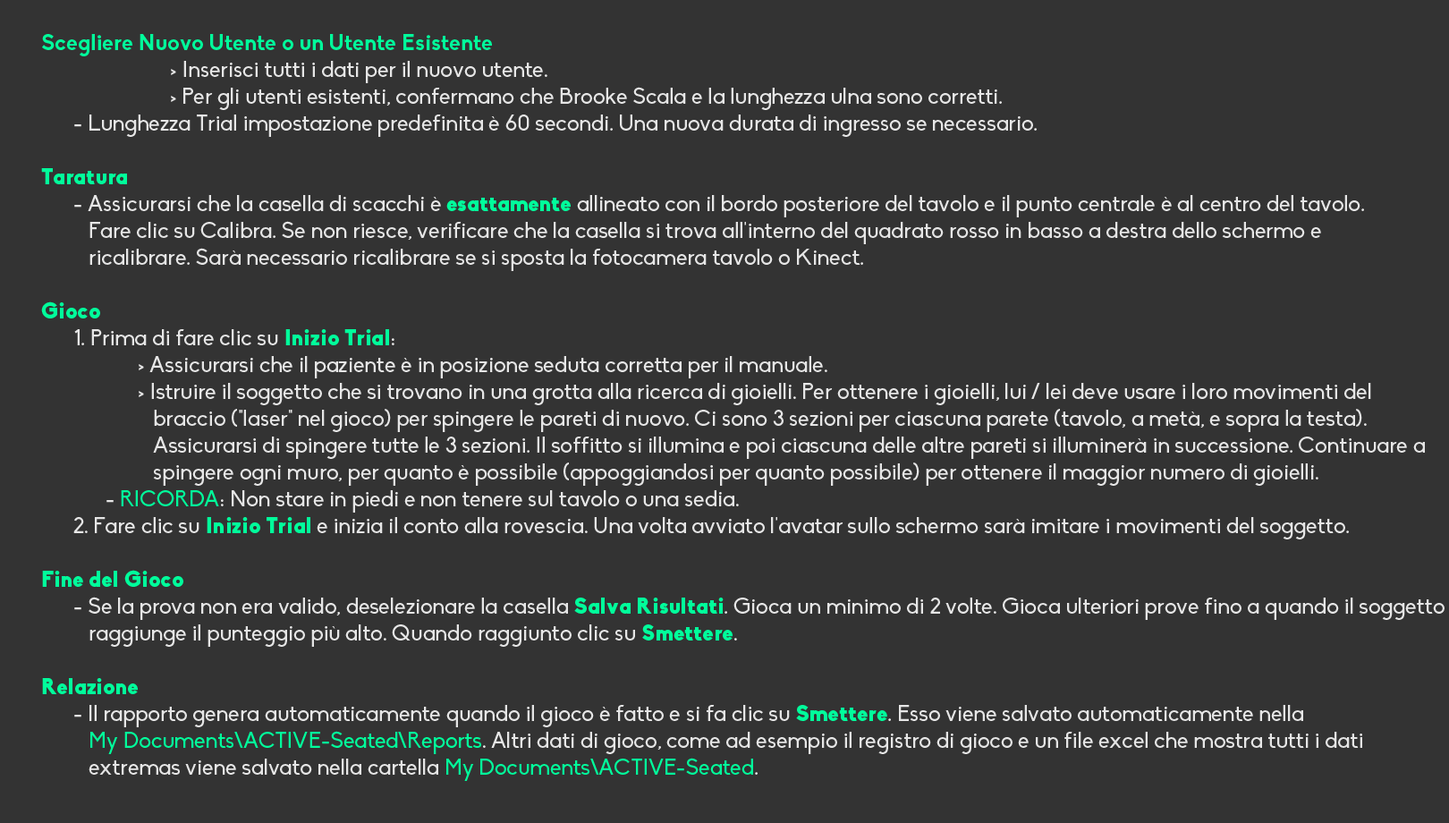
<style>
.page{position:relative;width:1449px;height:823px;background:#333333}
.page>*{position:absolute;margin:0}
.t1{font:22.4px "Biko";color:#e6e6e6}
.t2{font:22.4px "Biko-Bold";color:#00fe9b}
.t3{font:22.4px "Biko-Black";color:#00fe9b}
.t4{font:22.4px "Biko";color:#00fe9b}
</style>
<div class="page">
<p class="t1" style="left:41px;top:34px;width:1404px;height:747px"><span class="t2">Scegliere Nuovo Utente o un Utente Esistente <br></span>    &gt; Inserisci tutti i dati per il nuovo utente. <br>    &gt; Per gli utenti esistenti, confermano che Brooke Scala e la lunghezza ulna sono corretti. <br> - Lunghezza Trial impostazione predefinita è 60 secondi. Una nuova durata di ingresso se necessario. <br><br><span class="t3">Taratura <br></span> - Assicurarsi che la casella di scacchi è <span class="t3">esattamente</span> allineato con il bordo posteriore del tavolo e il punto centrale è al centro del tavolo. <br>    Fare clic su Calibra. Se non riesce, verificare che la casella si trova all'interno del quadrato rosso in basso a destra dello schermo e <br>    ricalibrare. Sarà necessario ricalibrare se si sposta la fotocamera tavolo o Kinect. <br><br><span class="t3">Gioco <br></span> 1. Prima di fare clic su <span class="t3">Inizio Trial</span>: <br>   &gt; Assicurarsi che il paziente è in posizione seduta corretta per il manuale. <br>   &gt; Istruire il soggetto che si trovano in una grotta alla ricerca di gioielli. Per ottenere i gioielli, lui / lei deve usare i loro movimenti del <br>      braccio ("laser" nel gioco) per spingere le pareti di nuovo. Ci sono 3 sezioni per ciascuna parete (tavolo, a metà, e sopra la testa). <br>      Assicurarsi di spingere tutte le 3 sezioni. Il soffitto si illumina e poi ciascuna delle altre pareti si illuminerà in successione. Continuare a<br>      spingere ogni muro, per quanto è possibile (appoggiandosi per quanto possibile) per ottenere il maggior numero di gioielli. <br>  - <span class="t4">RICORDA</span>: Non stare in piedi e non tenere sul tavolo o una sedia. <br> 2. Fare clic su <span class="t3">Inizio Trial</span> e inizia il conto alla rovescia. Una volta avviato l'avatar sullo schermo sarà imitare i movimenti del soggetto. <br><br><span class="t3">Fine del Gioco</span> <br> - Se la prova non era valido, deselezionare la casella <span class="t3">Salva Risultati</span>. Gioca un minimo di 2 volte. Gioca ulteriori prove fino a quando il soggetto <br>    raggiunge il punteggio più alto. Quando raggiunto clic su <span class="t3">Smettere</span>. <br><br><span class="t3">Relazione <br></span> - Il rapporto genera automaticamente quando il gioco è fatto e si fa clic su <span class="t3">Smettere</span>. Esso viene salvato automaticamente nella <br>    <span class="t4">My Documents\ACTIVE-Seated\Reports</span>. Altri dati di gioco, come ad esempio il registro di gioco e un file excel che mostra tutti i dati <br>    extremas viene salvato nella cartella <span class="t4">My Documents\ACTIVE-Seated</span>.</p>
</div>
